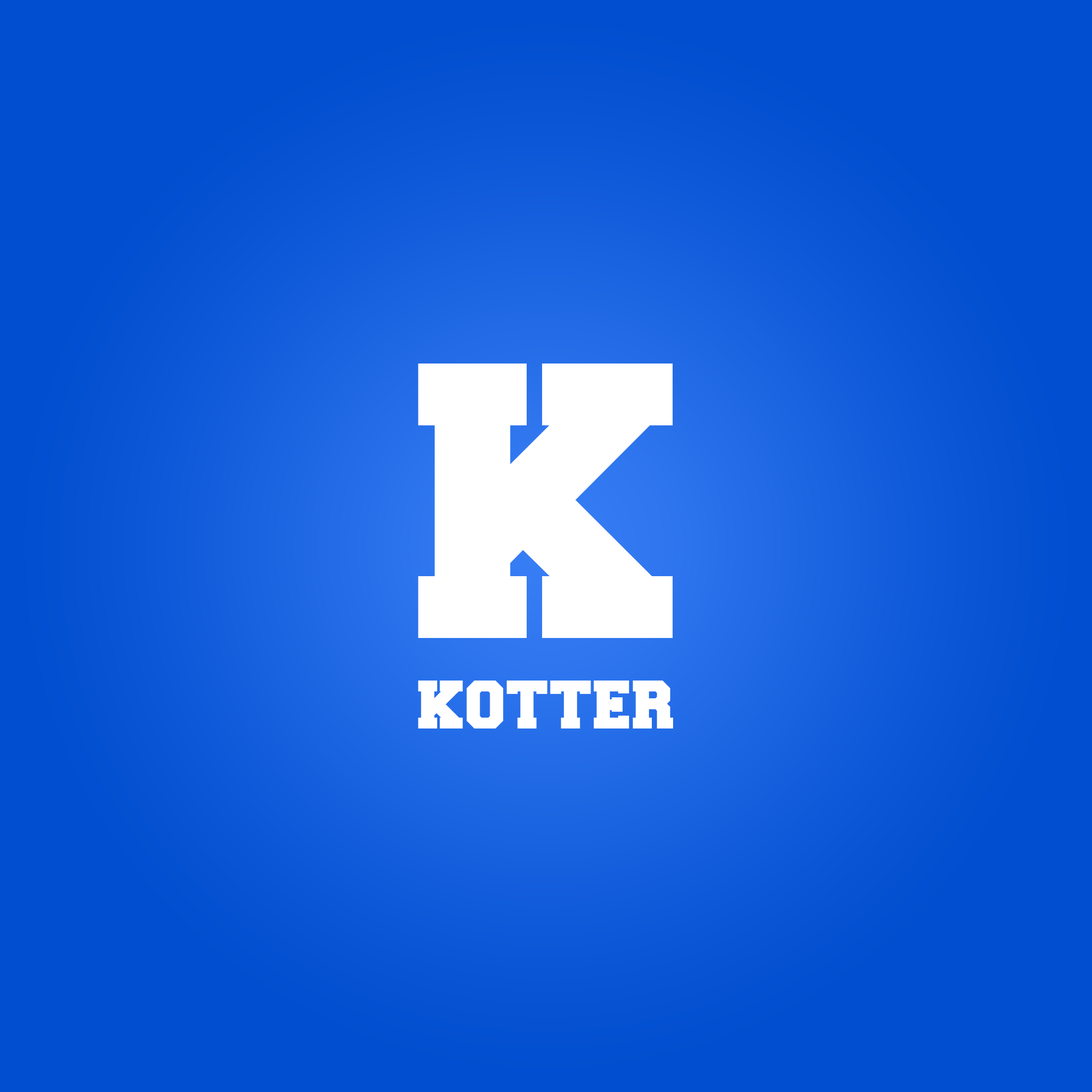
<style>
.page{position:relative;width:1092px;height:1092px;background:#024ed0}
.page>*{position:absolute;margin:0}
.t1{font:329.2px "Freshman";color:#ffffff}
.t2{font:71.8px "Freshman";color:#ffffff}
</style>
<div class="page">
<p class="t1" style="left:418px;top:364px;width:255px;height:274px">K</p>
<p class="t2" style="left:418px;top:681px;width:255px;height:47px">kotter</p>
</div>
